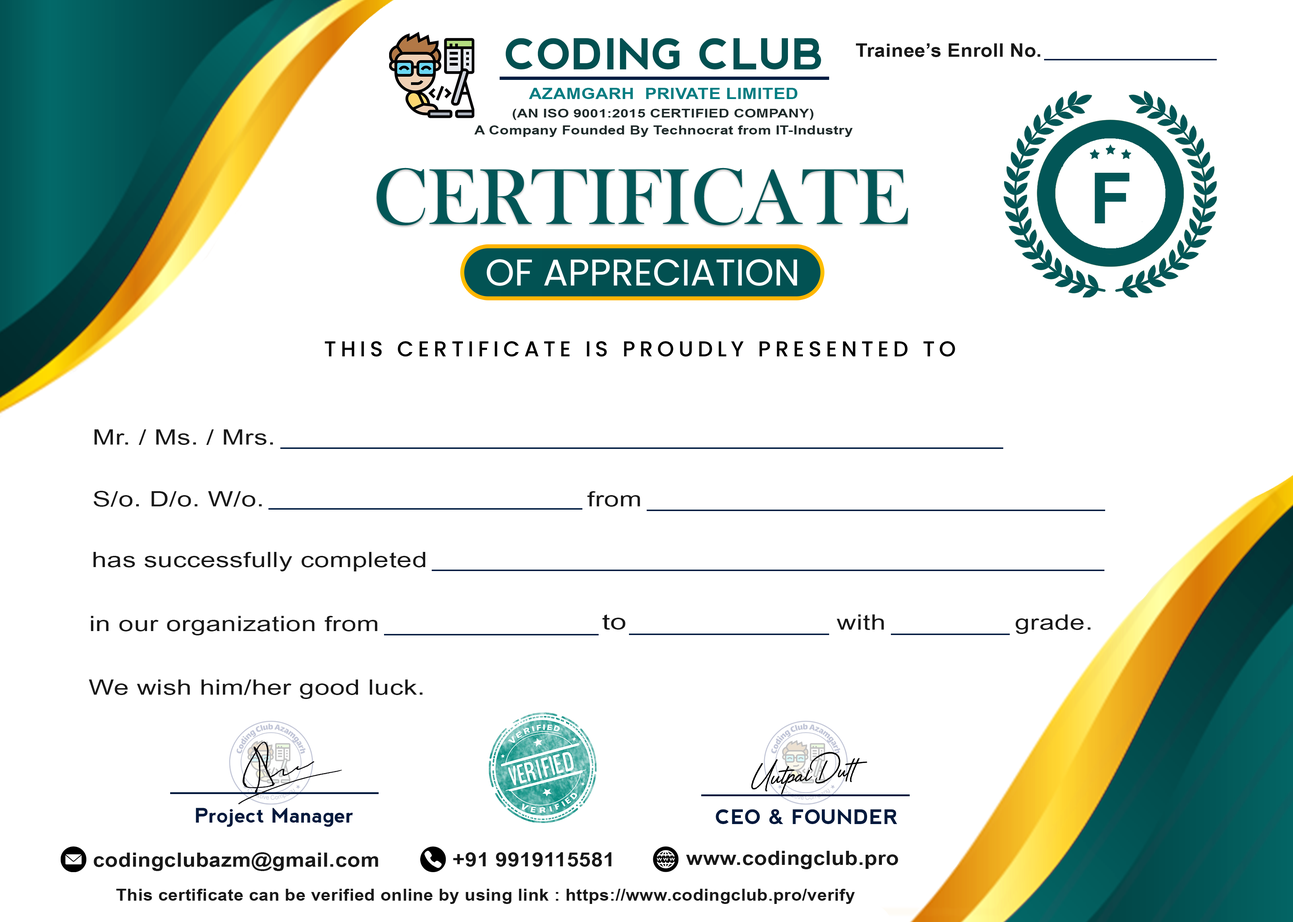
<style>
.page{position:relative;width:1293px;height:922px;background:#ffffff}
.page>*{position:absolute;margin:0}
.t1{font:42.6px "nevis-Bold";letter-spacing:0.01em;color:#025051}
.t2{font:18.3px "ArialNarrow-Bold";letter-spacing:0.01em;color:#181818;scale:1.3 1}
.t3{font:15.5px "ArialNarrow-Bold";letter-spacing:0.01em;color:#017d82;scale:1.4 1}
.t4{font:11.8px "ArialNarrow-Bold";letter-spacing:0.01em;color:#1e2a2a;scale:1.53 1}
.t5{font:12.7px "ArialNarrow-Bold";letter-spacing:0.01em;color:#1e2a2a;scale:1.42 1}
.t6{font:70.6px "Arial-BoldMT";letter-spacing:0.01em;color:#025657}
.t7{font:21.1px "ArialNarrow";letter-spacing:0.01em;color:#191919;scale:1.55 1}
.t8{font:21.1px "ArialNarrow";letter-spacing:0.01em;color:#181818;scale:1.55 1}
.t9{font:21.2px "ArialNarrow";letter-spacing:0.01em;color:#181818;scale:1.68 1}
.t10{font:20.1px "nevis-Bold";letter-spacing:0.01em;color:#00193d}
.t11{font:19.6px "ArialNarrow-Bold";letter-spacing:0.01em;color:#181818;scale:1.33 1}
.t12{font:16.8px "ArialNarrow-Bold";letter-spacing:0.01em;color:#181818;scale:1.28 1}
</style>
<div class="page">
<p class="t1" style="left:506px;top:38px;width:315px;height:32px">CODING CLUB</p>
<p class="t2" style="left:856px;top:43px;width:185px;height:14px">Trainee’s Enroll No.</p>
<p class="t3" style="left:529px;top:88px;width:269px;height:11px">AZAMGARH  PRIVATE LIMITED</p>
<p class="t4" style="left:513px;top:109px;width:301px;height:11px">(AN ISO 9001:2015 CERTIFIED COMPANY)</p>
<p class="t5" style="left:475px;top:125px;width:378px;height:12px">A Company Founded By Technocrat from IT-Industry</p>
<p class="t6" style="left:1095px;top:173px;width:35px;height:50px">F</p>
<p class="t7" style="left:94px;top:429px;width:179px;height:16px">Mr. / Ms. / Mrs.</p>
<p class="t8" style="left:94px;top:491px;width:168px;height:16px">S/o. D/o. W/o.</p>
<p class="t8" style="left:587px;top:491px;width:53px;height:16px">from</p>
<p class="t8" style="left:93px;top:552px;width:332px;height:19px">has successfully completed</p>
<p class="t8" style="left:91px;top:616px;width:287px;height:19px">in our organization from</p>
<p class="t9" style="left:602px;top:614px;width:24px;height:16px">to</p>
<p class="t8" style="left:837px;top:614px;width:47px;height:16px">with</p>
<p class="t8" style="left:1016px;top:614px;width:75px;height:20px">grade.</p>
<p class="t8" style="left:89px;top:679px;width:334px;height:20px">We wish him/her good luck.</p>
<p class="t10" style="left:196px;top:808px;width:157px;height:19px">Project Manager</p>
<p class="t10" style="left:716px;top:809px;width:181px;height:15px">CEO &amp; FOUNDER</p>
<p class="t11" style="left:94px;top:852px;width:284px;height:19px">codingclubazm@gmail.com</p>
<p class="t11" style="left:453px;top:852px;width:159px;height:15px">+91 9919115581</p>
<p class="t11" style="left:686px;top:851px;width:212px;height:18px">www.codingclub.pro</p>
<p class="t12" style="left:116px;top:889px;width:739px;height:15px">This certificate can be verified online by using link : https://www.codingclub.pro/verify</p>
</div>
